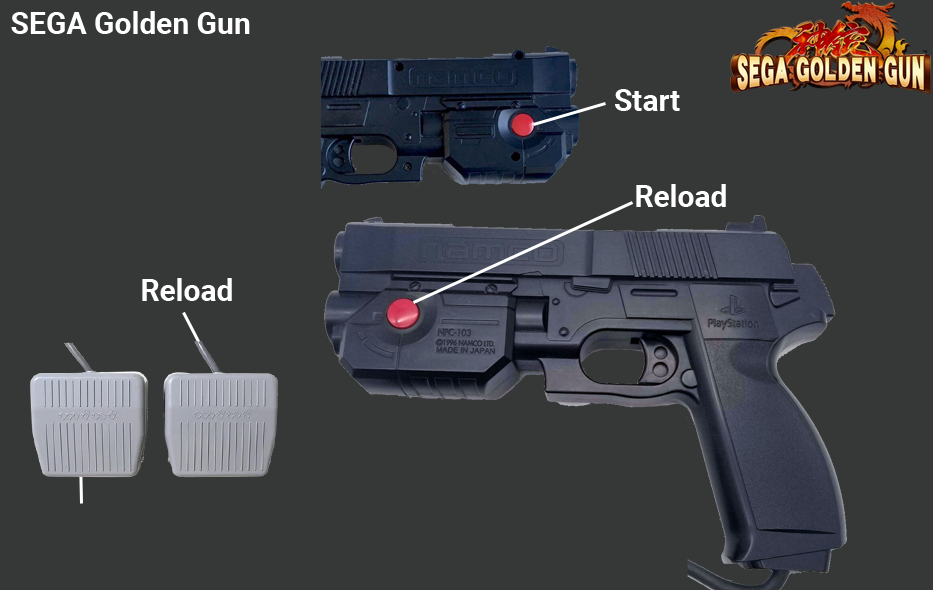
<style>
.page{position:relative;width:933px;height:590px;background:#363838}
.page>*{position:absolute;margin:0}
.t1{font:30px "Roboto-Bold";color:#ffffff}
</style>
<div class="page">
<p class="t1" style="left:11px;top:11px;width:239px;height:23px">SEGA Golden Gun</p>
<p class="t1" style="left:615px;top:89px;width:65px;height:22px">Start</p>
<p class="t1" style="left:636px;top:184px;width:90px;height:23px">Reload</p>
<p class="t1" style="left:142px;top:278px;width:90px;height:23px">Reload</p>
</div>
